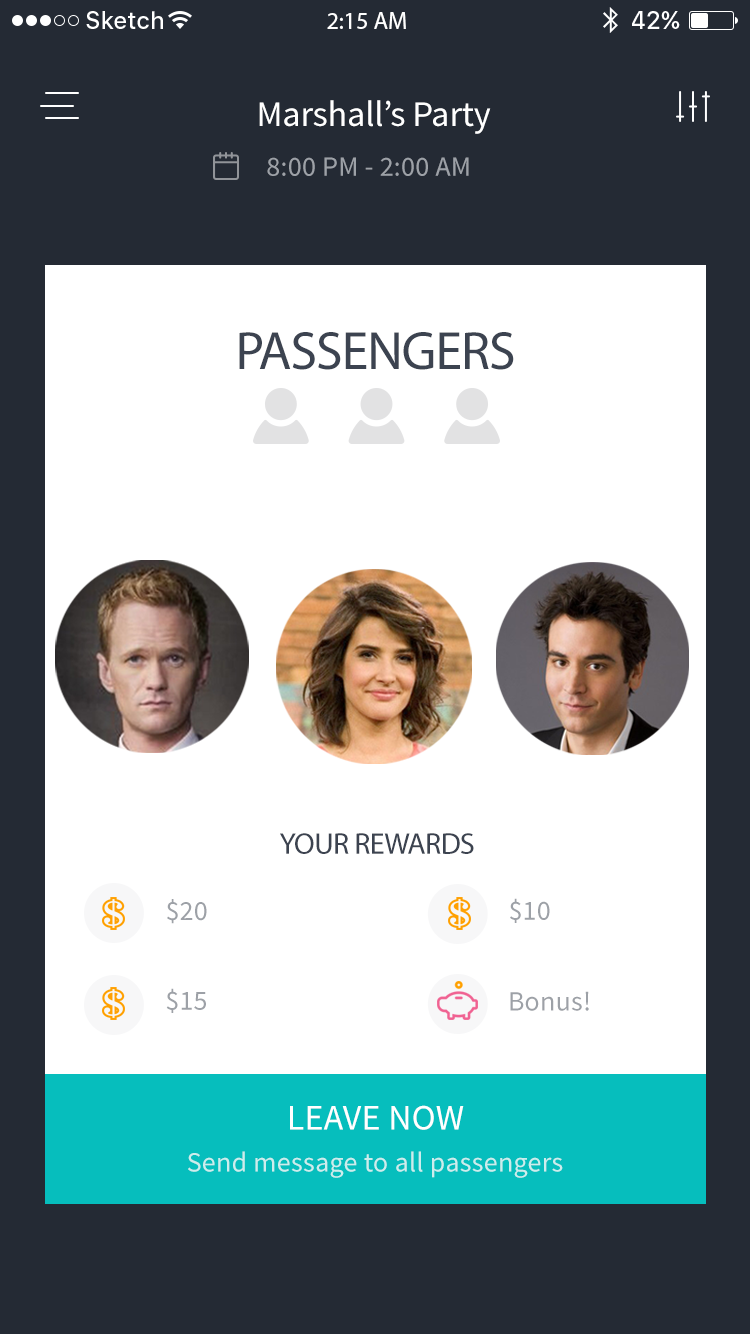
<style>
.page{position:relative;width:750px;height:1334px;background:#ffffff}
.page>*{position:absolute;margin:0}
.t1{font:24px "SFUIText-Medium";color:#ffffff}
.t2{font:24px "MyriadPro-Regular";color:#ffffff}
.t3{font:36px "SourceSansPro-Regular";letter-spacing:-0.005em;color:#ffffff}
.t4{font:28px "SourceSansPro-Regular";letter-spacing:0.01em;color:#9da1a7}
.t5{font:54px "MyriadPro-Regular";letter-spacing:-0.02em;color:#3c4350}
.t6{font:30px "MyriadPro-Regular";letter-spacing:-0.02em;color:#3c4350}
.t7{font:36px "SourceSansPro-Regular";letter-spacing:0.01em;color:#ffffff}
.t8{font:28px "SourceSansPro-Regular";letter-spacing:0.01em;color:#cceded}
</style>
<div class="page">
<p class="t1" style="left:86px;top:11px;width:77px;height:18px">Sketch</p>
<p class="t2" style="left:327px;top:12px;width:79px;height:17px">2:15 AM</p>
<p class="t1" style="left:632px;top:11px;width:48px;height:18px">42%</p>
<p class="t3" style="left:259px;top:100px;width:232px;height:34px">Marshall’s Party</p>
<p class="t4" style="left:267px;top:157px;width:202px;height:19px">8:00 PM - 2:00 AM</p>
<p class="t5" style="left:239px;top:332px;width:275px;height:38px">PASSENGERS</p>
<p class="t6" style="left:280px;top:833px;width:194px;height:21px">YOUR REWARDS</p>
<p class="t4" style="left:167px;top:899px;width:40px;height:25px">$20</p>
<p class="t4" style="left:510px;top:898px;width:40px;height:25px">$10</p>
<p class="t4" style="left:166px;top:988px;width:40px;height:25px">$15</p>
<p class="t4" style="left:510px;top:991px;width:79px;height:20px">Bonus!</p>
<p class="t7" style="left:290px;top:1105px;width:174px;height:25px">LEAVE NOW</p>
<p class="t8" style="left:188px;top:1151px;width:375px;height:27px">Send message to all passengers</p>
</div>
